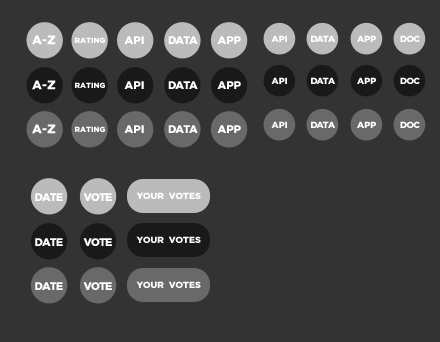
<style>
.page{position:relative;width:440px;height:342px;background:#333333}
.page>*{position:absolute;margin:0}
.t1{font:12.5px "GothamBlack";color:#ffffff}
.t2{font:7.6px "GothamBlack";color:#ffffff}
.t3{font:11px "GothamBlack";color:#ffffff}
.t4{font:11px "GothamBlack";letter-spacing:-0.1em;color:#ffffff}
.t5{font:9px "GothamBlack";color:#ffffff}
.t6{font:9px "GothamBlack";letter-spacing:-0.1em;color:#ffffff}
.t7{font:9px "GothamBlack";letter-spacing:-0.05em;color:#ffffff}
</style>
<div class="page">
<p class="t1" style="left:32px;top:35px;width:24px;height:10px">A-Z</p>
<p class="t2" style="left:75px;top:37px;width:30px;height:6px">RATING</p>
<p class="t3" style="left:124px;top:36px;width:20px;height:8px">API</p>
<p class="t4" style="left:168px;top:36px;width:30px;height:8px">DATA</p>
<p class="t3" style="left:217px;top:36px;width:24px;height:8px">APP</p>
<p class="t5" style="left:271px;top:35px;width:16px;height:7px">API</p>
<p class="t6" style="left:311px;top:35px;width:24px;height:7px">DATA</p>
<p class="t5" style="left:357px;top:35px;width:19px;height:7px">APP</p>
<p class="t7" style="left:400px;top:35px;width:20px;height:7px">DOC</p>
<p class="t5" style="left:271px;top:77px;width:16px;height:7px">API</p>
<p class="t6" style="left:311px;top:77px;width:24px;height:7px">DATA</p>
<p class="t5" style="left:357px;top:77px;width:19px;height:7px">APP</p>
<p class="t7" style="left:400px;top:77px;width:20px;height:7px">DOC</p>
<p class="t1" style="left:32px;top:80px;width:24px;height:10px">A-Z</p>
<p class="t2" style="left:75px;top:82px;width:30px;height:6px">RATING</p>
<p class="t3" style="left:124px;top:81px;width:20px;height:8px">API</p>
<p class="t4" style="left:168px;top:81px;width:30px;height:8px">DATA</p>
<p class="t3" style="left:217px;top:81px;width:24px;height:8px">APP</p>
<p class="t1" style="left:32px;top:124px;width:24px;height:10px">A-Z</p>
<p class="t2" style="left:75px;top:126px;width:30px;height:6px">RATING</p>
<p class="t3" style="left:124px;top:125px;width:20px;height:8px">API</p>
<p class="t4" style="left:168px;top:125px;width:30px;height:8px">DATA</p>
<p class="t3" style="left:217px;top:125px;width:24px;height:8px">APP</p>
<p class="t5" style="left:271px;top:121px;width:16px;height:7px">API</p>
<p class="t6" style="left:311px;top:121px;width:24px;height:7px">DATA</p>
<p class="t5" style="left:357px;top:121px;width:19px;height:7px">APP</p>
<p class="t7" style="left:400px;top:121px;width:20px;height:7px">DOC</p>
<p class="t4" style="left:35px;top:193px;width:28px;height:8px">DATE</p>
<p class="t4" style="left:83px;top:193px;width:29px;height:8px">VOTE</p>
<p class="t5" style="left:136px;top:192px;width:65px;height:7px">YOUR  VOTES</p>
<p class="t4" style="left:35px;top:238px;width:28px;height:8px">DATE</p>
<p class="t4" style="left:83px;top:238px;width:29px;height:8px">VOTE</p>
<p class="t5" style="left:136px;top:236px;width:65px;height:7px">YOUR  VOTES</p>
<p class="t5" style="left:136px;top:281px;width:65px;height:7px">YOUR  VOTES</p>
<p class="t4" style="left:35px;top:282px;width:28px;height:8px">DATE</p>
<p class="t4" style="left:83px;top:282px;width:29px;height:8px">VOTE</p>
</div>
